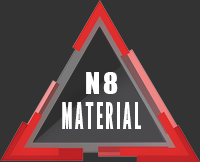
<style>
.page{position:relative;width:200px;height:162px;background:#333333}
.page>*{position:absolute;margin:0}
.t1{font:28px "Impact";letter-spacing:0.1em;color:#ffffff}
.t2{font:36px "LeagueGothic-CondensedRegular";letter-spacing:0.05em;color:#ffffff}
</style>
<div class="page">
<p class="t1" style="left:86px;top:72px;width:32px;height:22px">N8</p>
<p class="t2" style="left:62px;top:102px;width:79px;height:27px">MATERIAL</p>
</div>
